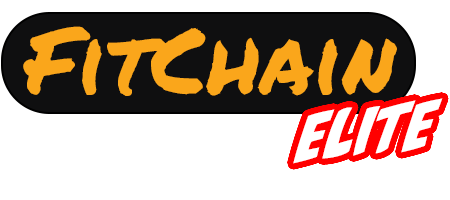
<style>
.page{position:relative;width:450px;height:200px;background:#ffffff}
.page>*{position:absolute;margin:0}
.t1{font:91.7px "PermanentMarker-Regular";color:#faa61b}
.t2{font:58.7px "CCBiffBamBoom";color:#ffffff}
</style>
<div class="page">
<p class="t1" style="left:23px;top:26px;width:374px;height:70px">FitChain</p>
<p class="t2" style="left:293px;top:98px;width:150px;height:66px;rotate:-6deg">ELITE</p>
</div>
